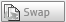
<style>
.page{position:relative;width:66px;height:22px}
.page>*{position:absolute;margin:0}
.t1{font:11.2px "Tahoma";letter-spacing:0.1em;color:#8d8d8d;scale:0.86 1}
</style>
<div class="page">
<p class="t1" style="left:24px;top:8px;width:26px;height:10px">Swap</p>
</div>
